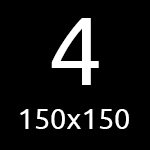
<style>
.page{position:relative;width:150px;height:150px;background:#000000}
.page>*{position:absolute;margin:0}
.t1{font:97px "Ubuntu";color:#ffffff}
.t2{font:29px "Ubuntu";color:#ffffff}
</style>
<div class="page">
<p class="t1" style="left:51px;top:18px;width:48px;height:67px">4</p>
<p class="t2" style="left:20px;top:109px;width:109px;height:20px">150x150</p>
</div>
